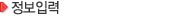
<style>
.page{position:relative;width:180px;height:18px;background:#ffffff}
.page>*{position:absolute;margin:0}
.t1{font:14.7px "YDIYGO330";letter-spacing:-0.03em;color:#373737;scale:0.92 1}
</style>
<div class="page">
<p class="t1" style="left:11px;top:1px;width:48px;height:14px">정보입력</p>
</div>
